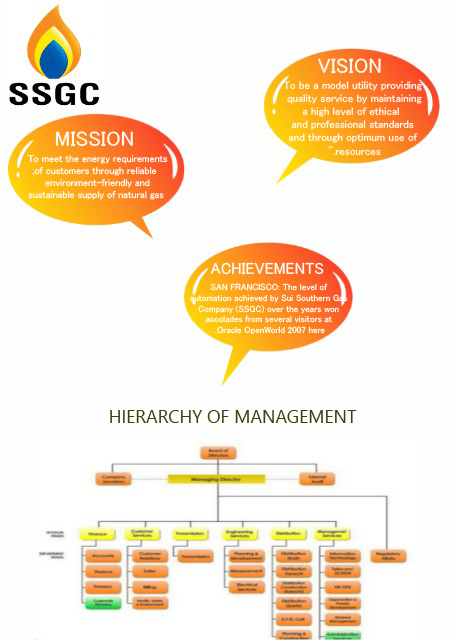
<style>
.page{position:relative;width:451px;height:640px;background:#fefefe}
.page>*{position:absolute;margin:0}
.t1{font:21px "MS-UIGothic";color:#fbfcf6}
.t2{font:11px "MS-UIGothic";color:#fbfcf6}
.t3{font:10px "MS-UIGothic";color:#fbfcf6}
.t4{font:16px "MS-UIGothic";color:#fbfcf6}
.t5{font:9px "MS-UIGothic";color:#fbfcf6}
.t6{font:18px "SegoeUI";color:#3a440a}
</style>
<div class="page">
<p class="t1" style="left:318px;top:58px;width:63px;height:16px">VISION</p>
<p class="t2" style="left:283px;top:81px;width:139px;height:75px;text-align:center">To be a model utility providing <br>quality service by maintaining<br> a high level of ethical <br>and professional standards <br>and through optimum use of <br>resources."</p>
<p class="t1" style="left:55px;top:131px;width:78px;height:16px">MISSION</p>
<p class="t3" style="left:27px;top:155px;width:141px;height:45px;text-align:center">To meet the energy requirements<br> of customers through reliable, <br>environment-friendly and<br> sustainable supply of natural gas</p>
<p class="t4" style="left:210px;top:262px;width:114px;height:13px">ACHIEVEMENTS</p>
<p class="t5" style="left:190px;top:283px;width:158px;height:52px;text-align:center">SAN FRANCISCO: The level of <br>automation achieved by Sui Southern Gas <br>Company (SSGC) over the years won <br>accolades from several visitors at <br>Oracle OpenWorld 2007 here.</p>
<p class="t6" style="left:110px;top:410px;width:247px;height:13px">HIERARCHY OF MANAGEMENT</p>
</div>
